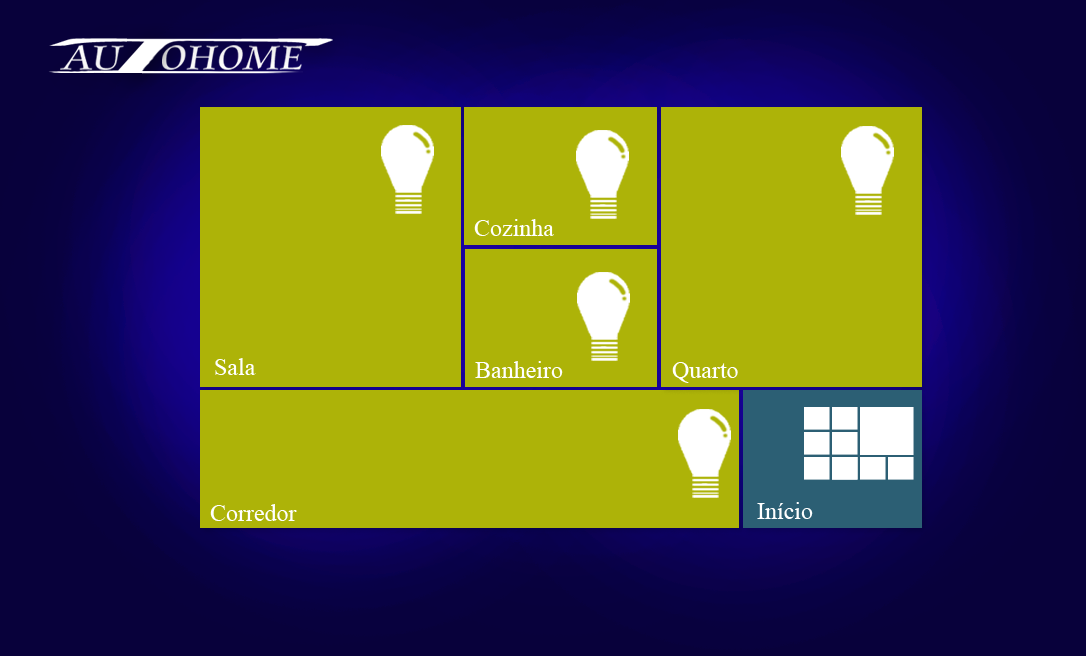
<style>
.page{position:relative;width:1086px;height:656px;background:#adb308}
.page>*{position:absolute;margin:0}
.t1{font:36.4px "CataneoBT-Regular";color:#ffffff;scale:1.13 1}
.t2{font:24px "TimesNewRomanPSMT";color:#ffffff}
</style>
<div class="page">
<p class="t1" style="left:162px;top:45px;width:140px;height:25px">OHOME</p>
<p class="t2" style="left:474px;top:219px;width:80px;height:17px">Cozinha</p>
<p class="t2" style="left:215px;top:358px;width:41px;height:17px">Sala</p>
<p class="t2" style="left:475px;top:361px;width:88px;height:17px">Banheiro</p>
<p class="t2" style="left:672px;top:362px;width:66px;height:21px">Quarto</p>
<p class="t2" style="left:210px;top:504px;width:87px;height:17px">Corredor</p>
<p class="t2" style="left:757px;top:502px;width:56px;height:17px">Início</p>
</div>
